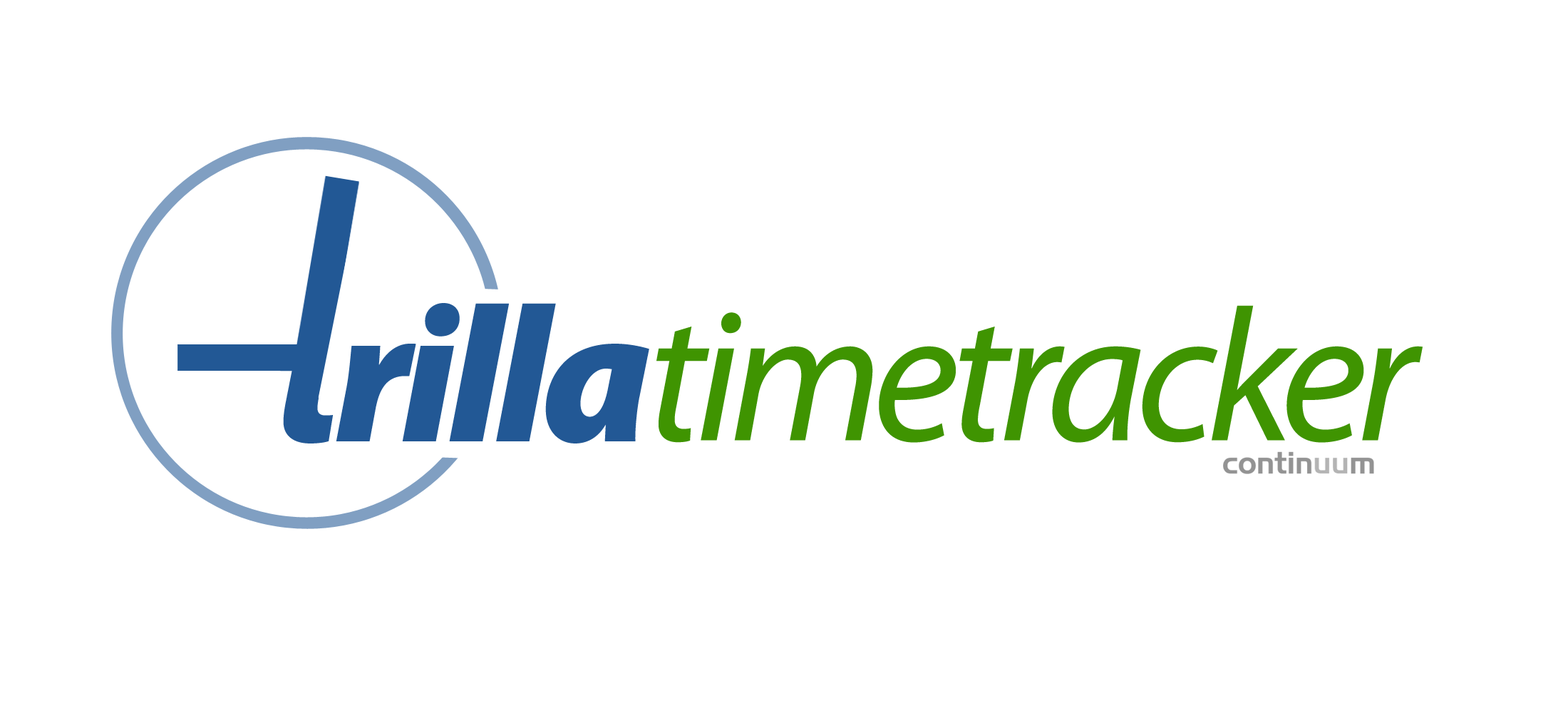
<style>
.page{position:relative;width:1568px;height:713px;background:#ffffff}
.page>*{position:absolute;margin:0}
.t1{font:193.9px "MyriadPro-BlackIt";letter-spacing:-0.04em;color:#225895}
.t2{font:193.9px "MyriadPro-BlackIt";letter-spacing:-0.05em;color:#225895}
.t3{font:189.2px "MyriadPro-It";letter-spacing:-0.05em;color:#3f9401}
</style>
<div class="page">
<p class="t1" style="left:280px;top:303px;width:369px;height:140px"><span class="t2">tr</span>illa</p>
<p class="t3" style="left:656px;top:305px;width:767px;height:138px">timetracker</p>
</div>
